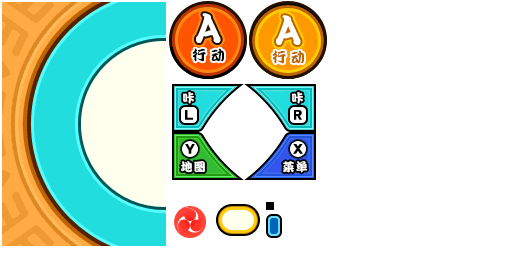
<style>
.page{position:relative;width:512px;height:256px;background:#ffffff}
.page>*{position:absolute;margin:0}
.t1{font:14px "DFPKanTingLiuW9";color:#000000}
.t2{font:14px "DFPKanTingLiuW9";color:#bb6600}
.t3{font:12px "DFPKanTingLiuW9";color:#ffffff}
.t4{font:12px "DFPKanTingLiuW9";letter-spacing:0.1em;color:#ffffff}
</style>
<div class="page">
<p class="t1" style="left:192px;top:48px;width:32px;height:14px">行 动</p>
<p class="t2" style="left:272px;top:50px;width:32px;height:14px">行 动</p>
<p class="t3" style="left:183px;top:92px;width:11px;height:12px">咔</p>
<p class="t3" style="left:292px;top:92px;width:11px;height:12px">咔</p>
<p class="t4" style="left:181px;top:161px;width:24px;height:12px">地图</p>
<p class="t4" style="left:283px;top:161px;width:25px;height:12px">菜单</p>
</div>
